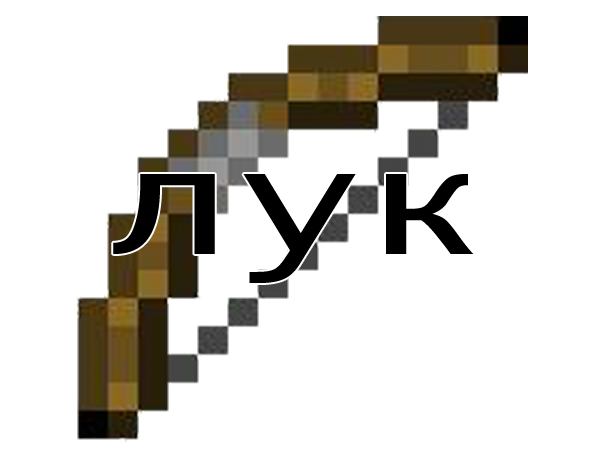
<style>
.page{position:relative;width:600px;height:450px;background:#ffffff}
.page>*{position:absolute;margin:0}
.t1{font:150px "LucidaConsole";color:#000000;scale:1.39 1}
</style>
<div class="page">
<p class="t1" style="left:113px;top:174px;width:361px;height:109px">лук</p>
</div>
